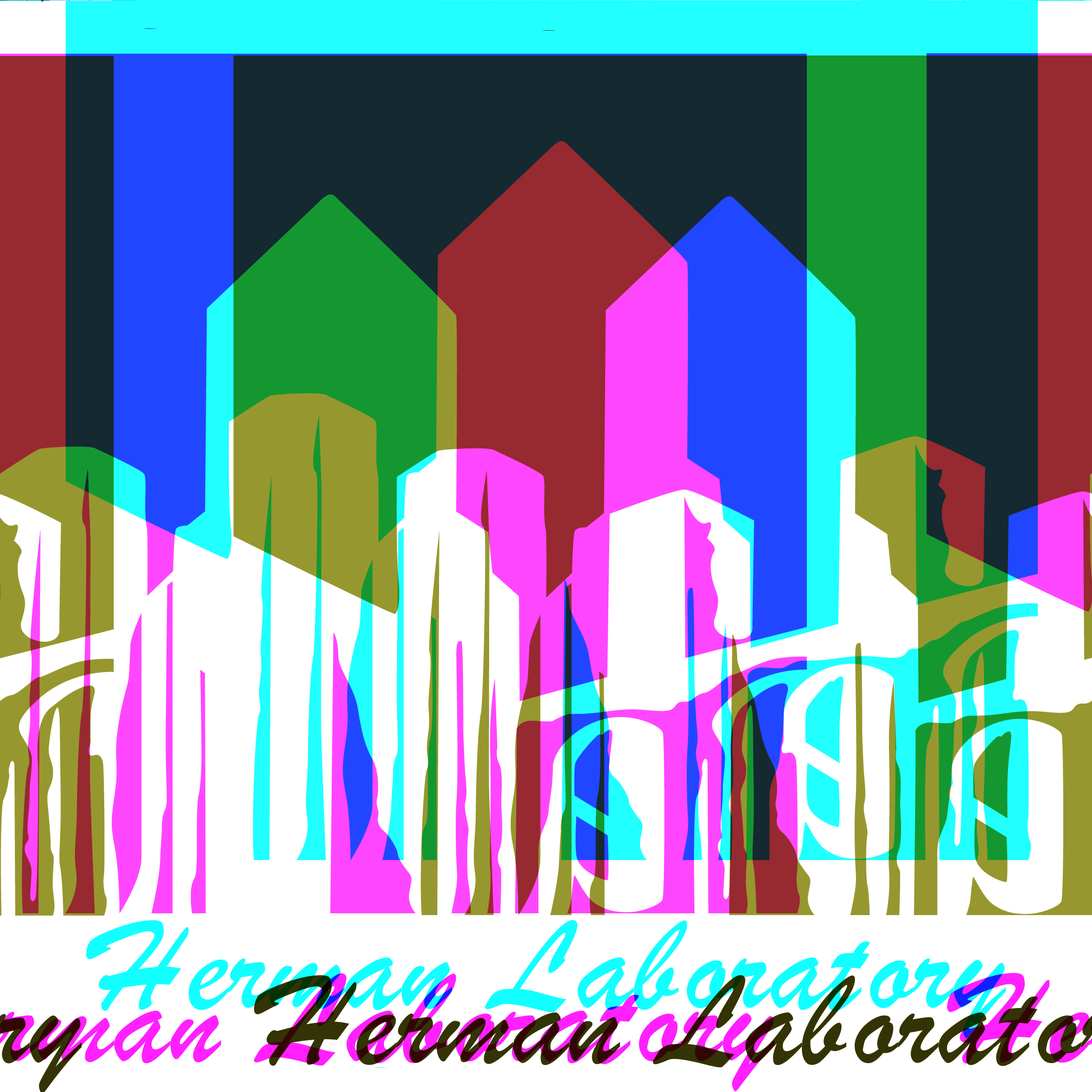
<style>
.page{position:relative;width:1092px;height:1092px;background:#ffffff}
.page>*{position:absolute;margin:0}
.t1{font:135.4px "STXingkaiTC-Bold";color:#12ffff}
</style>
<div class="page">
<p class="t1" style="left:86px;top:920px;width:920px;height:118px">Herman Laboratory</p>
</div>
